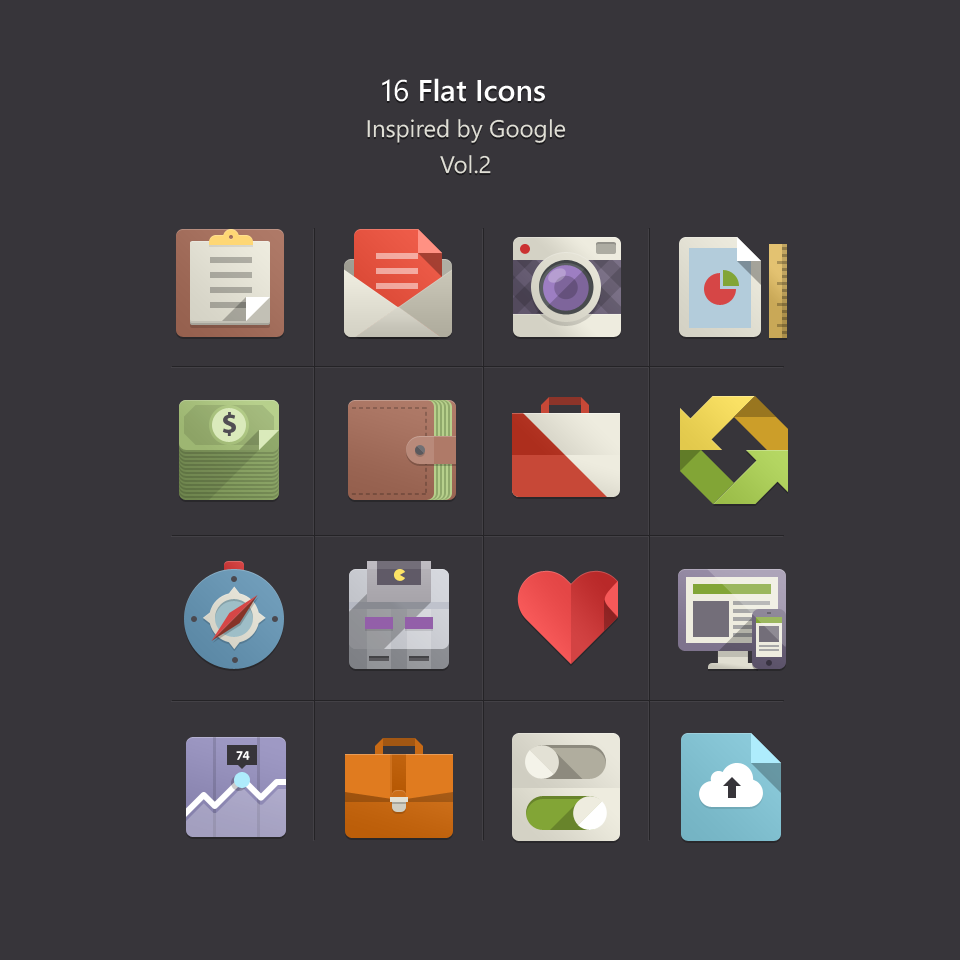
<style>
.page{position:relative;width:960px;height:960px;background:#37353a}
.page>*{position:absolute;margin:0}
.t1{font:24px/36px "SegoeWP";color:#e0dfd6}
.t2{font:30px/36px "SegoeWP";color:#ffffff}
.t3{font:30px/36px "SegoeWP-Semibold";color:#ffffff}
</style>
<div class="page">
<p class="t1" style="left:367px;top:78px;width:199px;height:96px;text-align:center"><span class="t2">16</span><span class="t3"> Flat Icons<br></span>Inspired by Google<br>Vol.2</p>
</div>
